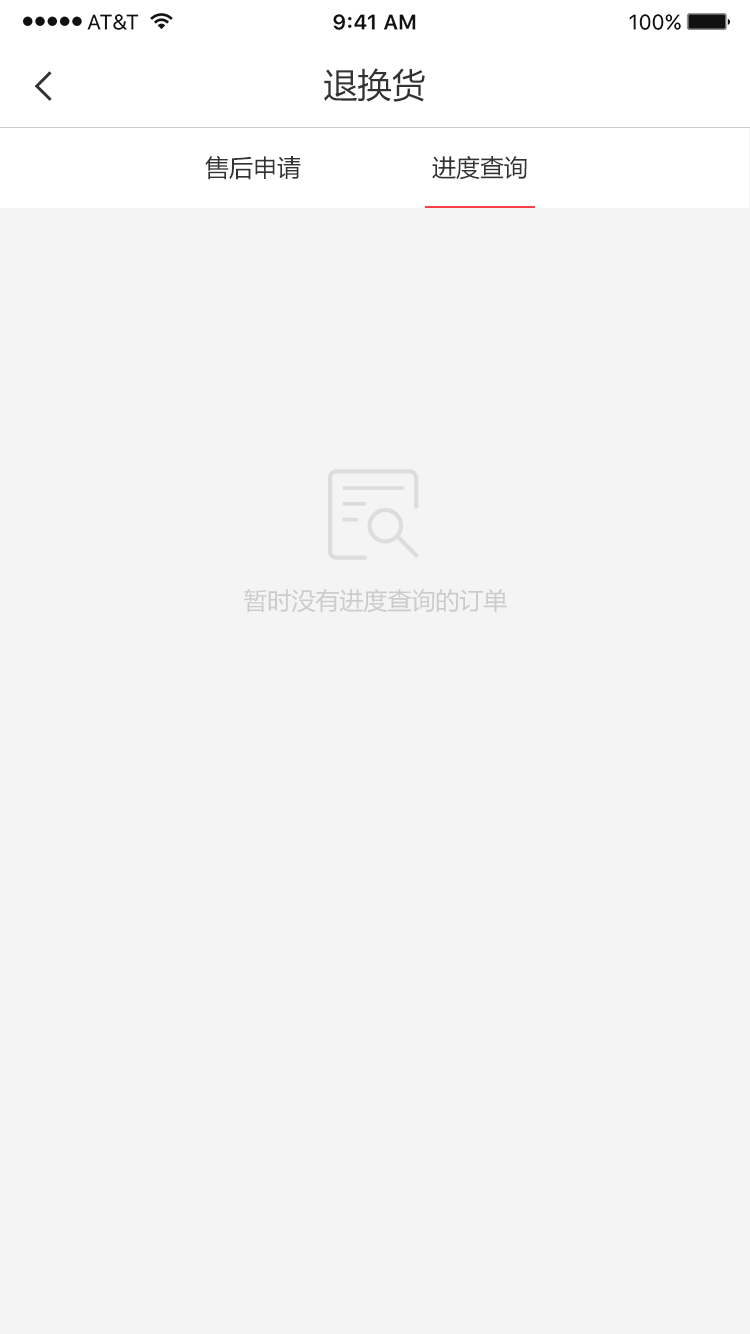
<style>
.page{position:relative;width:750px;height:1334px;background:#f4f4f4}
.page>*{position:absolute;margin:0}
.t1{font:34px "MicrosoftYaHei";color:#333333}
.t2{font:24px "MicrosoftYaHei";color:#333333}
.t3{font:24px "MicrosoftYaHei";color:#cccccc}
</style>
<div class="page">
<p class="t1" style="left:324px;top:68px;width:101px;height:34px">退换货</p>
<p class="t2" style="left:205px;top:155px;width:96px;height:25px">售后申请</p>
<p class="t2" style="left:432px;top:155px;width:95px;height:25px">进度查询</p>
<p class="t3" style="left:244px;top:588px;width:263px;height:25px">暂时没有进度查询的订单</p>
</div>
